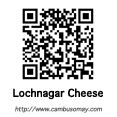
<style>
.page{position:relative;width:117px;height:117px;background:#ffffff}
.page>*{position:absolute;margin:0}
.t1{font:10px "Geneva";letter-spacing:-0.01em;color:#010101;font-weight:bold}
.t2{font:6px "Geneva";letter-spacing:-0.01em;color:#5f5d5d;font-style:italic}
</style>
<div class="page">
<p class="t1" style="left:13px;top:88px;width:90px;height:12px">Lochnagar Cheese</p>
<p class="t2" style="left:15px;top:106px;width:87px;height:7px">http://www.cambusomay.com</p>
</div>
